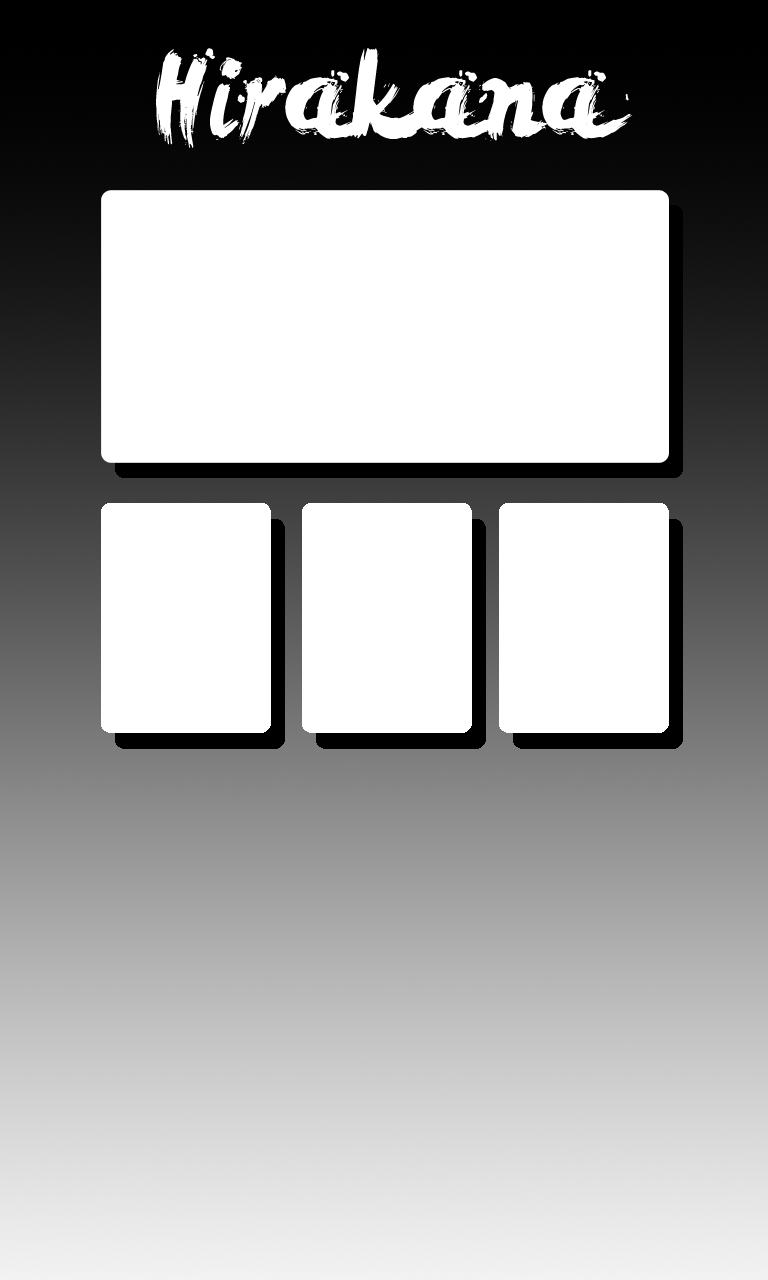
<style>
.page{position:relative;width:768px;height:1280px;background:#ffffff}
.page>*{position:absolute;margin:0}
.t1{font:118.4px "LeviReBrushed";color:#ffffff}
</style>
<div class="page">
<p class="t1" style="left:156px;top:48px;width:477px;height:100px">Hirakana</p>
</div>
